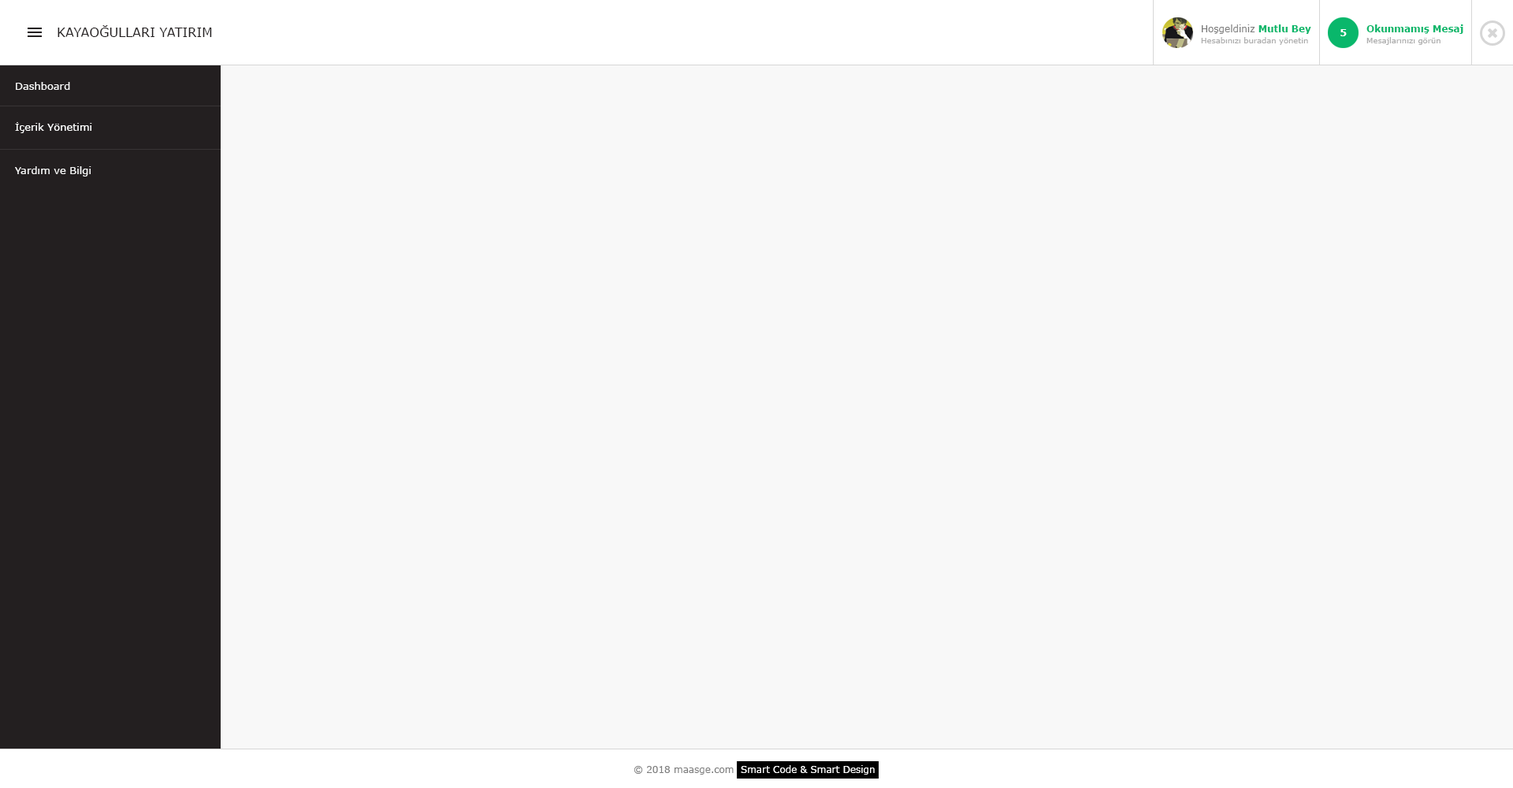
<style>
.page{position:relative;width:1513px;height:788px;background:#f8f8f8}
.page>*{position:absolute;margin:0}
.t1{font:12.6px "Verdana";color:#231f20}
.t2{font:9.5px "Verdana";color:#7d7d7d}
.t3{font:9.5px "Verdana-Bold";color:#09b76b}
.t4{font:9.5px "Verdana-Bold";color:#ffffff}
.t5{font:7.9px "Verdana";color:#aeaeae}
.t6{font:10.2px "Verdana";color:#f8f8f8}
.t7{font:10.2px "Verdana";color:#ffffff}
</style>
<div class="page">
<p class="t1" style="left:58px;top:25px;width:154px;height:12px">KAYAOĞULLARI YATIRIM</p>
<p class="t2" style="left:1202px;top:24px;width:109px;height:10px">Hoşgeldiniz <span class="t3">Mutlu Bey</span></p>
<p class="t4" style="left:1341px;top:29px;width:6px;height:7px">5</p>
<p class="t3" style="left:1367px;top:24px;width:96px;height:10px">Okunmamış Mesaj</p>
<p class="t5" style="left:1201px;top:37px;width:107px;height:8px">Hesabınızı buradan yönetin</p>
<p class="t5" style="left:1367px;top:37px;width:74px;height:8px">Mesajlarınızı görün</p>
<p class="t6" style="left:16px;top:82px;width:54px;height:8px">Dashboard</p>
<p class="t7" style="left:15px;top:122px;width:77px;height:11px">İçerik Yönetimi</p>
<p class="t6" style="left:15px;top:166px;width:76px;height:11px">Yardım ve Bilgi</p>
</div>
